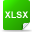
<style>
.page{position:relative;width:32px;height:32px}
.page>*{position:absolute;margin:0}
.t1{font:9px "Arial-BoldMT";color:#ffffff}
</style>
<div class="page">
<p class="t1" style="left:5px;top:11px;width:23px;height:7px">XLSX</p>
</div>
